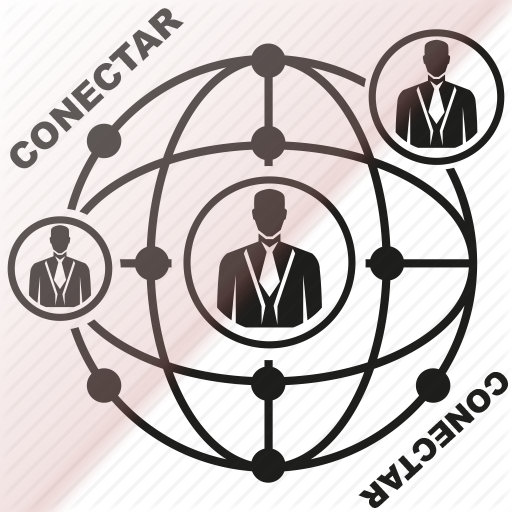
<style>
.page{position:relative;width:512px;height:512px}
.page>*{position:absolute;margin:0}
.t1{font:36px "Arial-Black";color:#5f5a58}
.t2{font:30.8px "Arial-Black";color:#1f1f1d}
</style>
<div class="page">
<p class="t1" style="left:10px;top:8px;width:174px;height:161px;rotate:-43deg">CONECTAR</p>
<p class="t2" style="left:358px;top:372px;width:150px;height:136px;rotate:137deg">CONECTAR</p>
</div>
